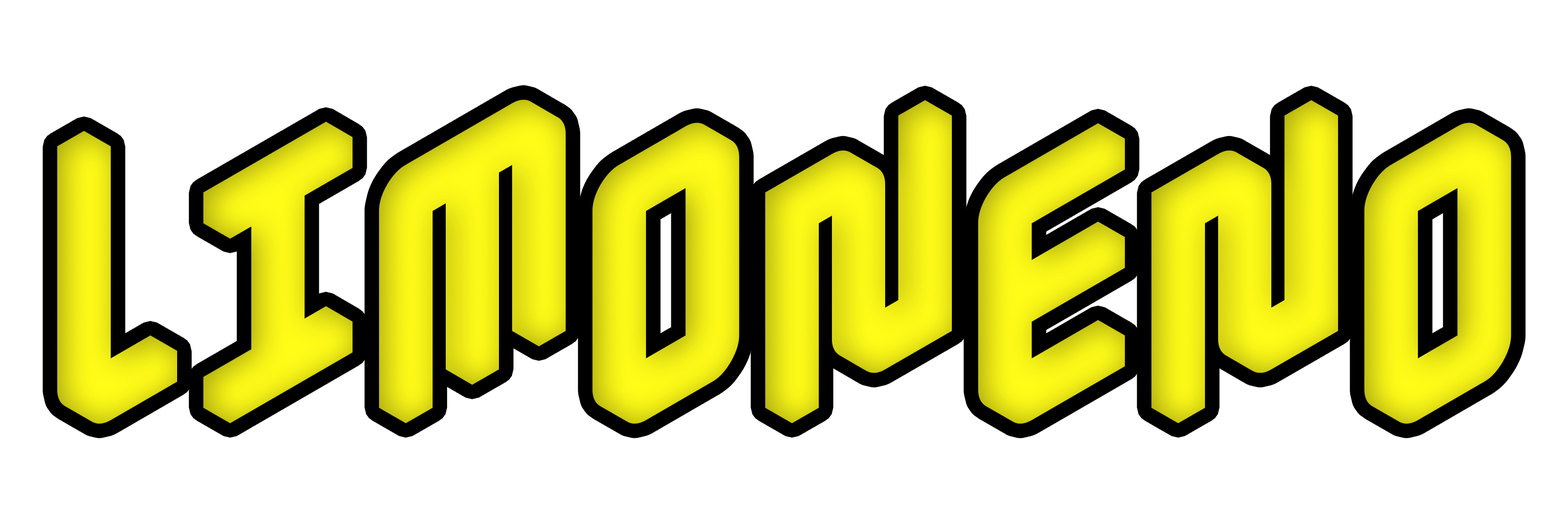
<style>
.page{position:relative;width:1568px;height:523px;background:#ffffff}
.page>*{position:absolute;margin:0}
.t1{font:307.3px "Nabla-Regular";color:#fffc18}
</style>
<div class="page">
<p class="t1" style="left:57px;top:100px;width:1454px;height:323px">LIMONENO</p>
</div>
